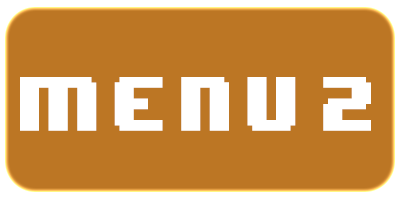
<style>
.page{position:relative;width:400px;height:200px;background:#bc7624}
.page>*{position:absolute;margin:0}
.t1{font:64.3px "8BITWONDERNominal";letter-spacing:0.16em;color:#ffffff;scale:0.89 1}
</style>
<div class="page">
<p class="t1" style="left:20px;top:77px;width:351px;height:54px">Menu 2</p>
</div>
